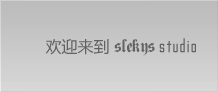
<style>
.page{position:relative;width:218px;height:92px}
.page>*{position:absolute;margin:0}
.t1{font:16px "PlainGermanica";color:#626262}
.t2{font:16px "MicrosoftYaHei";color:#626262}
.t3{font:20px "GothamNightsNormal";color:#626262}
</style>
<div class="page">
<p class="t1" style="left:45px;top:38px;width:151px;height:18px"><span class="t2">欢迎来到 </span>slekys <span class="t3">studio</span></p>
</div>
